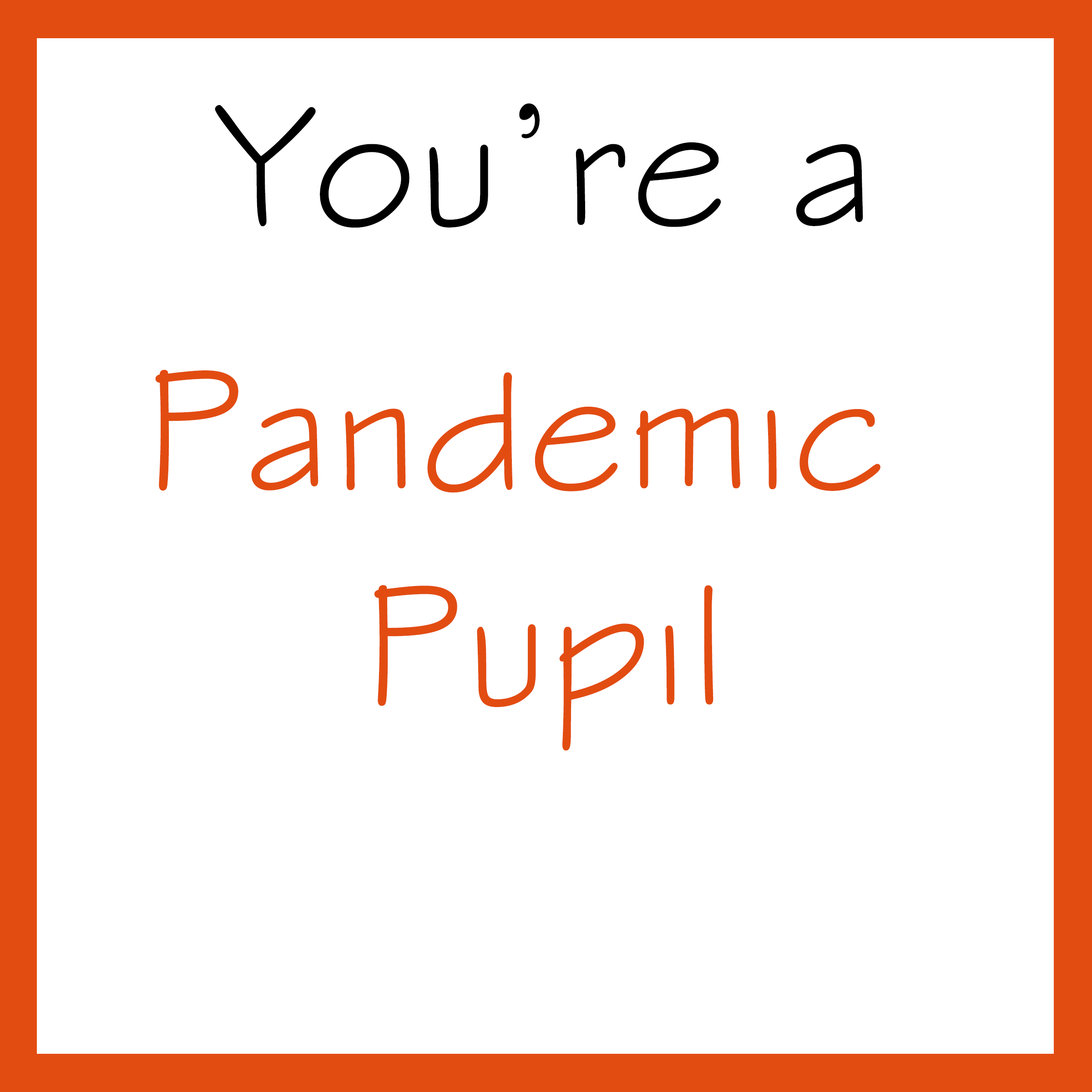
<style>
.page{position:relative;width:1092px;height:1092px;background:#ffffff}
.page>*{position:absolute;margin:0}
.t1{font:179.5px "StylusBT";letter-spacing:0.01em;color:#000000}
.t2{font:179.4px "StylusBT";letter-spacing:0.01em;color:#e24c11}
</style>
<div class="page">
<p class="t1" style="left:215px;top:103px;width:648px;height:125px">You’re a</p>
<p class="t2" style="left:155px;top:369px;width:725px;height:382px;text-align:center">Pandemic <br>Pupil</p>
</div>
